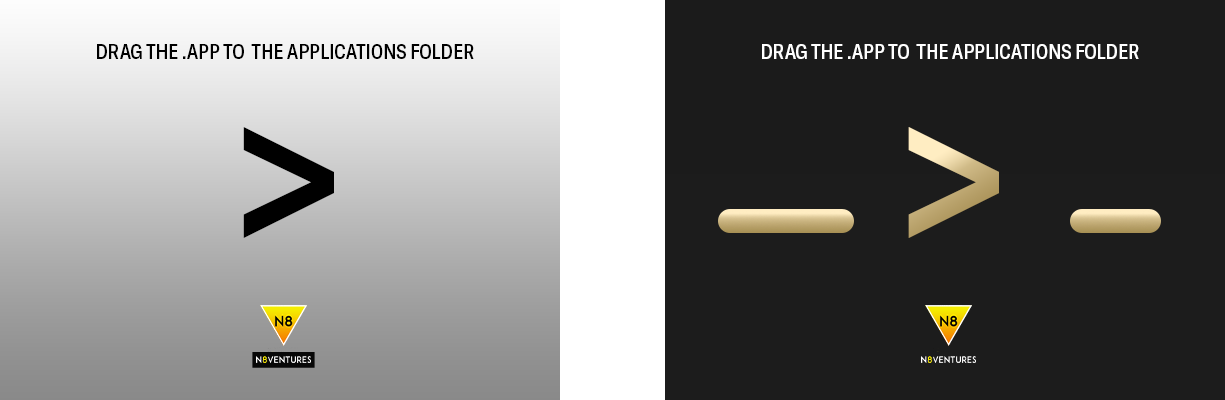
<style>
.page{position:relative;width:1225px;height:400px;background:#1c1c1c}
.page>*{position:absolute;margin:0}
.t1{font:20.9px "GTAmerica-CondensedMedium";color:#000000;text-transform:uppercase;scale:0.96 1}
.t2{font:20.9px "GTAmerica-CondensedMedium";color:#ffffff;text-transform:uppercase;scale:0.96 1}
.t3{font:239px "GTAmerica-CondensedMedium";color:#000000;text-transform:uppercase;scale:0.96 1}
.t4{font:239px "GTAmerica-CondensedMedium";text-transform:uppercase;scale:0.96 1}
</style>
<div class="page">
<p class="t1" style="left:97px;top:44px;width:377px;height:15px">Drag the .app to  the applications folder</p>
<p class="t2" style="left:762px;top:44px;width:377px;height:15px">Drag the .app to  the applications folder</p>
<p class="t3" style="left:243px;top:127px;width:91px;height:111px">&gt;</p>
<p class="t4" style="left:908px;top:127px;width:91px;height:111px">&gt;</p>
</div>
